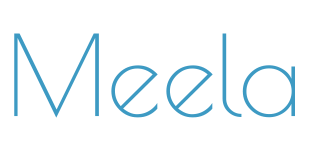
<style>
.page{position:relative;width:310px;height:150px;background:#ffffff}
.page>*{position:absolute;margin:0}
.t1{font:110px "PoiretOne-Regular";color:#3d9ac3}
</style>
<div class="page">
<p class="t1" style="left:14px;top:33px;width:281px;height:85px">Meela</p>
</div>
